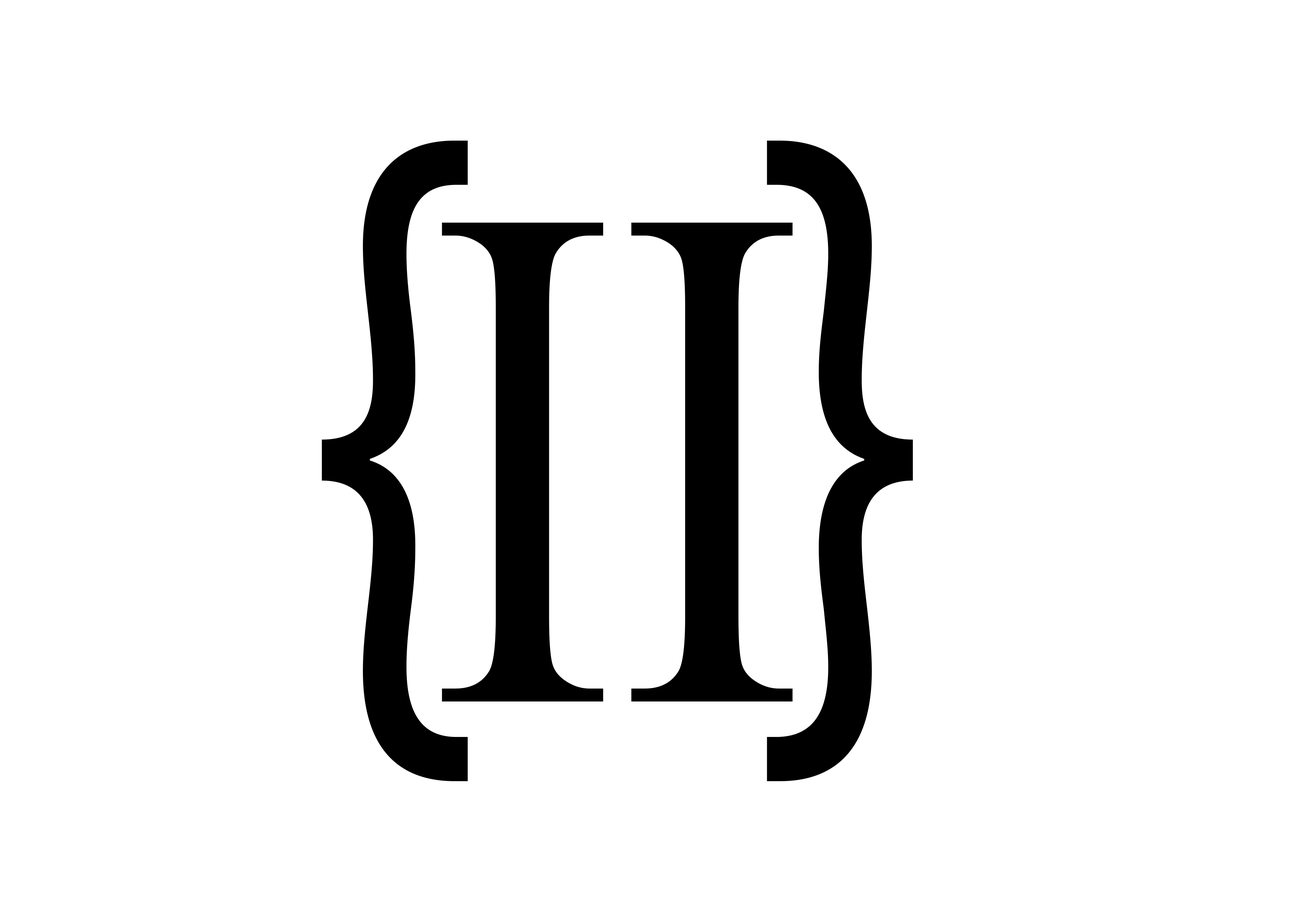
<style>
.page{position:relative;width:1292px;height:923px;background:#ffffff}
.page>*{position:absolute;margin:0}
.t1{font:803.6px "MyriadPro-Regular";color:#000000;scale:0.79 1}
.t2{font:723.2px "TimesNewRomanPSMT";color:#000000;scale:0.79 1}
</style>
<div class="page">
<p class="t1" style="left:322px;top:140px;width:591px;height:641px">{  }</p>
<p class="t2" style="left:442px;top:223px;width:351px;height:478px">II</p>
</div>
